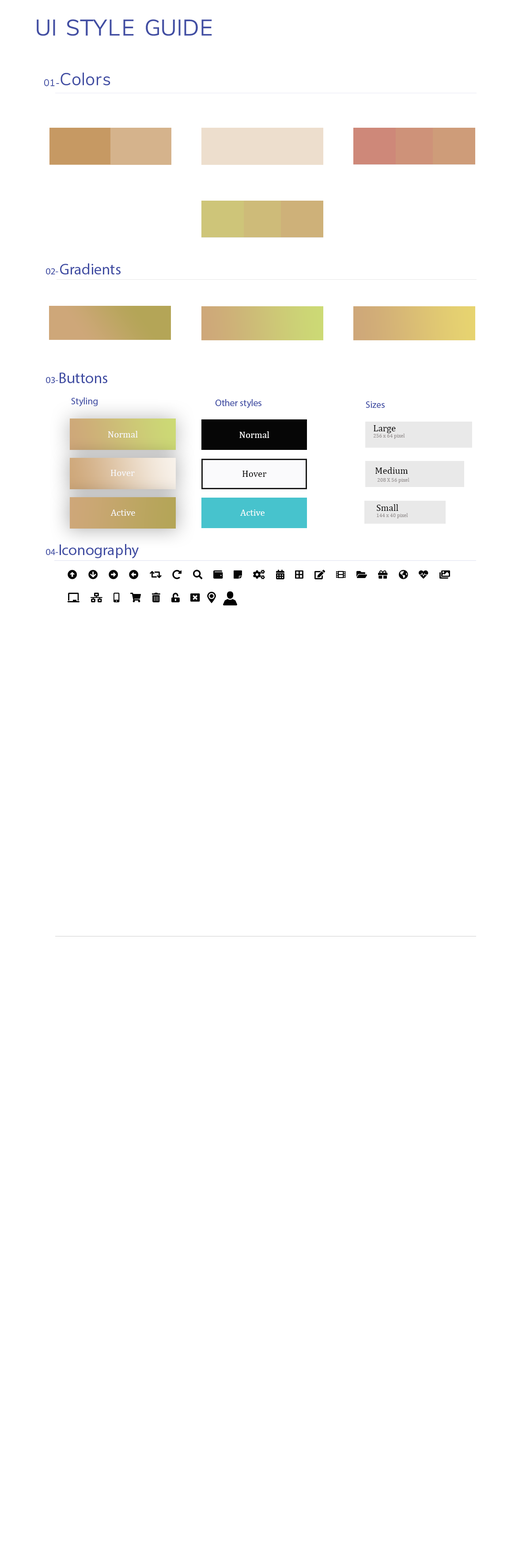
<style>
.page{position:relative;width:530px;height:1568px;background:#ffffff}
.page>*{position:absolute;margin:0}
.t1{font:15.3px "MyriadPro-Regular";color:#424ea2}
.t2{font:9.4px "MyriadPro-Regular";color:#424ea2}
.t3{font:5.3px "Cambria";color:#959090}
.t4{font:9.4px "Cambria";color:#0e0d0d}
.t5{font:9.4px "Cambria";color:#f7f8fc}
.t6{font:9.4px "Cambria";color:#fefefe}
</style>
<div class="page">
<p class="t1" style="left:46px;top:263px;width:75px;height:11px"><span class="t2">02- </span>Gradients</p>
<p class="t1" style="left:46px;top:373px;width:61px;height:10px"><span class="t2">03-</span>Buttons</p>
<p class="t2" style="left:71px;top:397px;width:27px;height:10px">Styling</p>
<p class="t2" style="left:215px;top:399px;width:47px;height:9px">Other styles</p>
<p class="t2" style="left:366px;top:401px;width:19px;height:7px">Sizes</p>
<p class="t3" style="left:373px;top:425px;width:32px;height:14px"><span class="t4">Large<br></span>256 x 64 pixel</p>
<p class="t5" style="left:108px;top:431px;width:30px;height:7px">Normal</p>
<p class="t6" style="left:240px;top:431px;width:30px;height:7px">Normal</p>
<p class="t5" style="left:110px;top:470px;width:25px;height:6px">Hover</p>
<p class="t4" style="left:243px;top:471px;width:23px;height:6px">Hover</p>
<p class="t4" style="left:376px;top:467px;width:32px;height:7px">Medium</p>
<p class="t3" style="left:377px;top:478px;width:33px;height:5px">208 X 56 pixel</p>
<p class="t5" style="left:110px;top:510px;width:25px;height:6px">Active</p>
<p class="t6" style="left:240px;top:510px;width:25px;height:6px">Active</p>
<p class="t3" style="left:377px;top:504px;width:31px;height:14px"><span class="t4">Small<br></span>144 x 40 pixel</p>
<p class="t1" style="left:46px;top:544px;width:93px;height:15px"><span class="t2">04-</span>Iconography</p>
</div>
